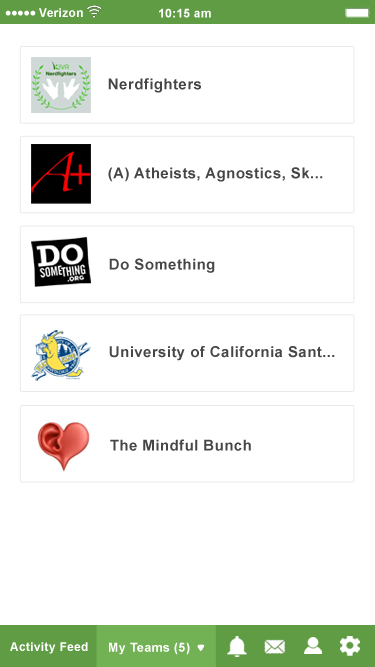
<style>
.page{position:relative;width:375px;height:667px;background:#ffffff}
.page>*{position:absolute;margin:0}
.t1{font:12px "Arial-BoldMT";letter-spacing:0.025em;color:#ffffff}
.t2{font:15.1px "Arial-BoldMT";letter-spacing:0.025em;color:#464646}
.t3{font:12.5px "Arial-BoldMT";letter-spacing:0.025em;color:#ffffff}
</style>
<div class="page">
<p class="t1" style="left:39px;top:8px;width:44px;height:9px">Verizon</p>
<p class="t1" style="left:159px;top:8px;width:52px;height:10px">10:15 am</p>
<p class="t2" style="left:108px;top:78px;width:93px;height:15px">Nerdfighters</p>
<p class="t2" style="left:108px;top:167px;width:215px;height:15px">(A) Atheists, Agnostics, Sk...</p>
<p class="t2" style="left:109px;top:258px;width:106px;height:15px">Do Something</p>
<p class="t2" style="left:109px;top:346px;width:226px;height:15px">University of California Sant...</p>
<p class="t2" style="left:110px;top:439px;width:141px;height:12px">The Mindful Bunch</p>
<p class="t1" style="left:10px;top:642px;width:78px;height:12px">Activity Feed</p>
<p class="t3" style="left:109px;top:642px;width:81px;height:13px">My Teams (5)</p>
</div>
